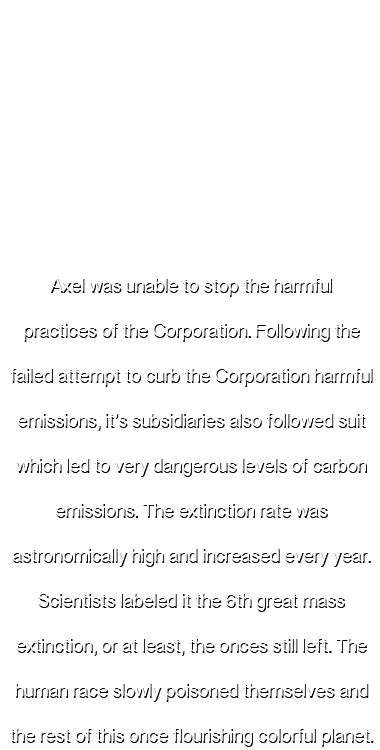
<style>
.page{position:relative;width:380px;height:750px;background:#ffffff}
.page>*{position:absolute;margin:0}
.t1{font:17.5px/45px "SinhalaSangamMN-Bold"}
</style>
<div class="page">
<p class="t1" style="left:10px;top:279px;width:364px;height:468px;text-align:center">Axel was unable to stop the harmful<br>practices of the Corporation. Following the<br>failed attempt to curb the Corporation harmful<br>emissions, it’s subsidiaries also followed suit<br>which led to very dangerous levels of carbon<br>emissions. The extinction rate was<br>astronomically high and increased every year.<br>Scientists labeled it the 6th great mass<br>extinction, or at least, the onces still left. The<br>human race slowly poisoned themselves and<br>the rest of this once flourishing colorful planet.</p>
</div>
